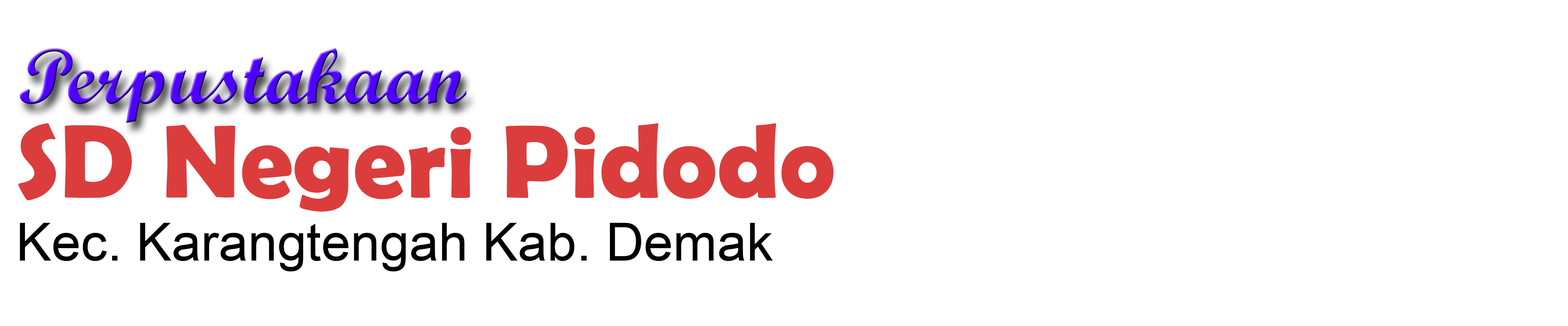
<style>
.page{position:relative;width:1568px;height:326px;background:#ffffff}
.page>*{position:absolute;margin:0}
.t1{font:79.1px "ScriptMTBold"}
.t2{font:52.7px "ArialMT";color:#000000}
.t3{font:105.4px "BerlinSansFBDemi-Bold";color:#db3d3d}
</style>
<div class="page">
<p class="t1" style="left:20px;top:48px;width:446px;height:75px">Perpustakaan</p>
<p class="t2" style="left:18px;top:123px;width:815px;height:149px"><span class="t3">SD Negeri Pidodo<br></span>Kec. Karangtengah Kab. Demak</p>
</div>
